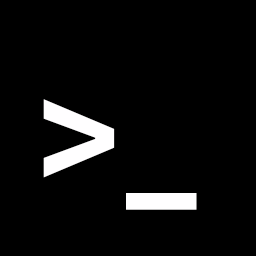
<style>
.page{position:relative;width:256px;height:256px;background:#000000}
.page>*{position:absolute;margin:0}
.t1{font:158.4px "CascadiaCodeRoman-SemiBold";color:#fffeff;font-weight:bold;scale:0.91 1}
</style>
<div class="page">
<p class="t1" style="left:43px;top:99px;width:154px;height:111px">&gt;_</p>
</div>
